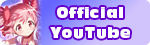
<style>
.page{position:relative;width:150px;height:45px}
.page>*{position:absolute;margin:0}
.t1{font:16px "AntiqueOliCom-Reg";letter-spacing:0.05em;color:#ffffff}
</style>
<div class="page">
<p class="t1" style="left:50px;top:7px;width:80px;height:32px;text-align:center">Official<br>YouTube</p>
</div>
